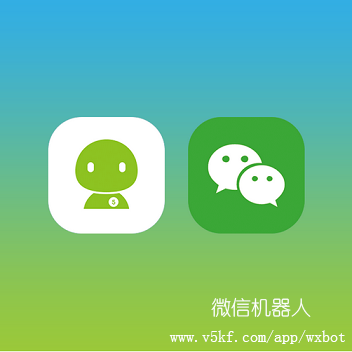
<style>
.page{position:relative;width:352px;height:352px}
.page>*{position:absolute;margin:0}
.t1{font:20px "YouYuan";color:#ffffff}
.t2{font:16px "YouYuan";color:#ffffff}
</style>
<div class="page">
<p class="t1" style="left:211px;top:297px;width:100px;height:20px">微信机器人</p>
<p class="t2" style="left:169px;top:330px;width:176px;height:14px">www.v5kf.com/app/wxbot</p>
</div>
